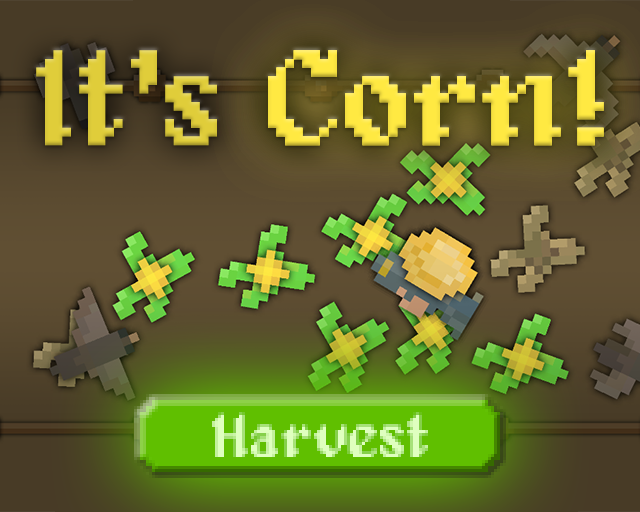
<style>
.page{position:relative;width:640px;height:512px}
.page>*{position:absolute;margin:0}
.t1{font:137.5px "Alagard";color:#e0cd3a}
.t2{font:137.5px "Alagard";color:#ffe942}
</style>
<div class="page">
<p class="t1" style="left:36px;top:50px;width:181px;height:96px">It's</p>
<p class="t2" style="left:268px;top:50px;width:336px;height:96px">Corn!</p>
<p class="t2" style="left:268px;top:50px;width:336px;height:96px">Corn!</p>
<p class="t2" style="left:268px;top:50px;width:336px;height:96px">Corn!</p>
</div>
